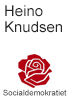
<style>
.page{position:relative;width:70px;height:99px;background:#ffffff}
.page>*{position:absolute;margin:0}
.t1{font:15px/16px "ArialMT";color:#282828}
.t2{font:8px "ArialMT"}
</style>
<div class="page">
<p class="t1" style="left:5px;top:5px;width:57px;height:28px">Heino<br>Knudsen</p>
<p class="t2" style="left:3px;top:89px;width:64px;height:7px">Socialdemokratiet</p>
</div>
